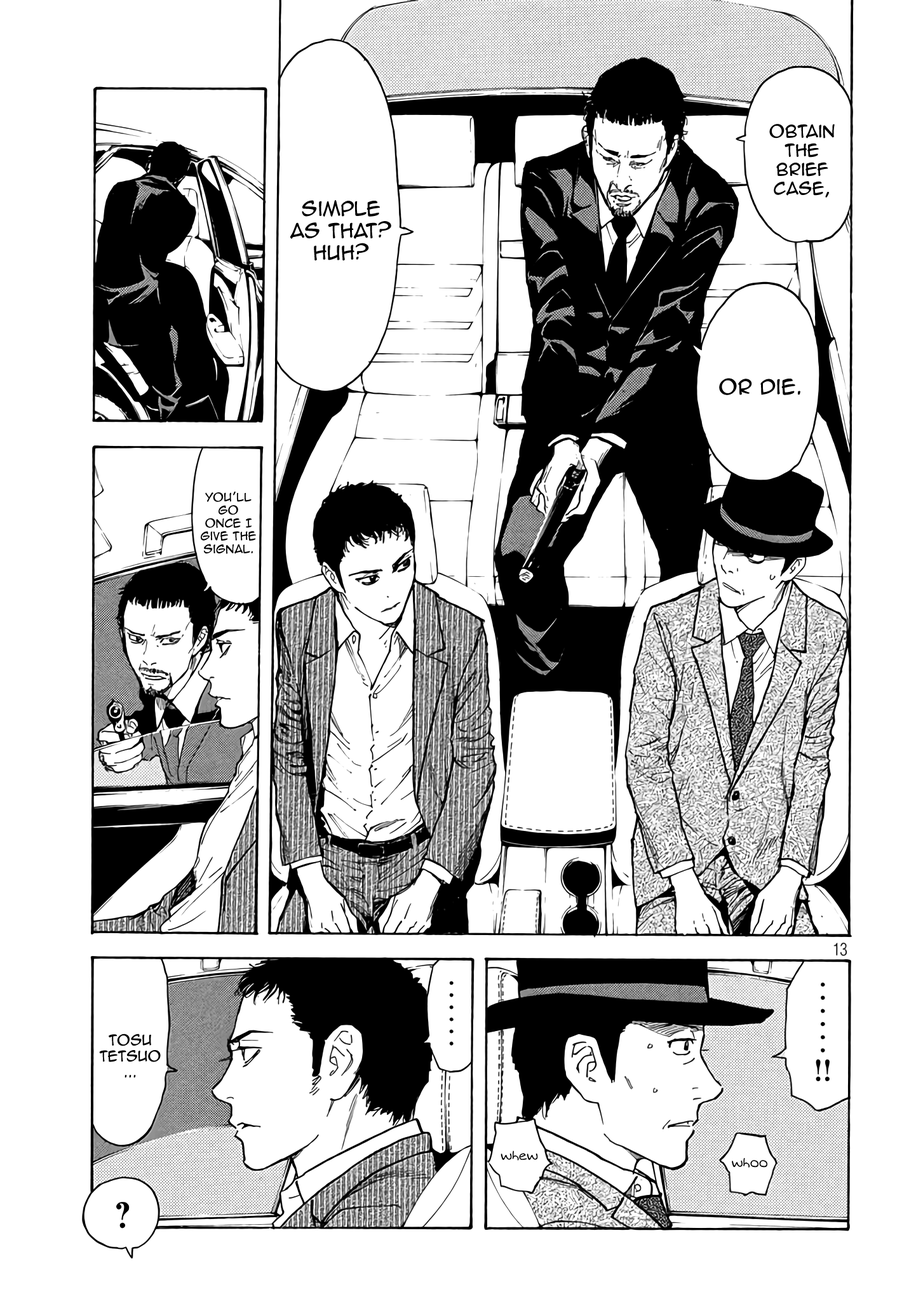
<style>
.page{position:relative;width:916px;height:1301px;background:#ffffff}
.page>*{position:absolute;margin:0}
.t1{font:15.9px "AnimeAce2.0BB";color:#000000}
.t2{font:18.4px "AnimeAce2.0BB";color:#000000}
.t3{font:19.1px "AnimeAce2.0BB";color:#000000}
.t4{font:10.8px "AnimeAce2.0BB";color:#000000}
.t5{font:13.3px "AnimeAce2.0BB";color:#000000}
.t6{font:12.7px "Augie";color:#000000}
</style>
<div class="page">
<p class="t1" style="left:770px;top:124px;width:65px;height:74px;text-align:center">obtain <br>the <br>brief<br>case,</p>
<p class="t2" style="left:290px;top:200px;width:101px;height:61px;text-align:center">Simple<br>as that? Huh?</p>
<p class="t3" style="left:719px;top:378px;width:82px;height:17px">Or Die.</p>
<p class="t4" style="left:201px;top:491px;width:55px;height:63px;text-align:center">You’ll go once I give the signal.</p>
<p class="t5" style="left:99px;top:1034px;width:62px;height:44px;text-align:center">Tosu Tetsuo<br>...</p>
<p class="t6" style="left:501px;top:1151px;width:37px;height:10px">whew</p>
<p class="t6" style="left:732px;top:1158px;width:36px;height:10px">whoo</p>
</div>
